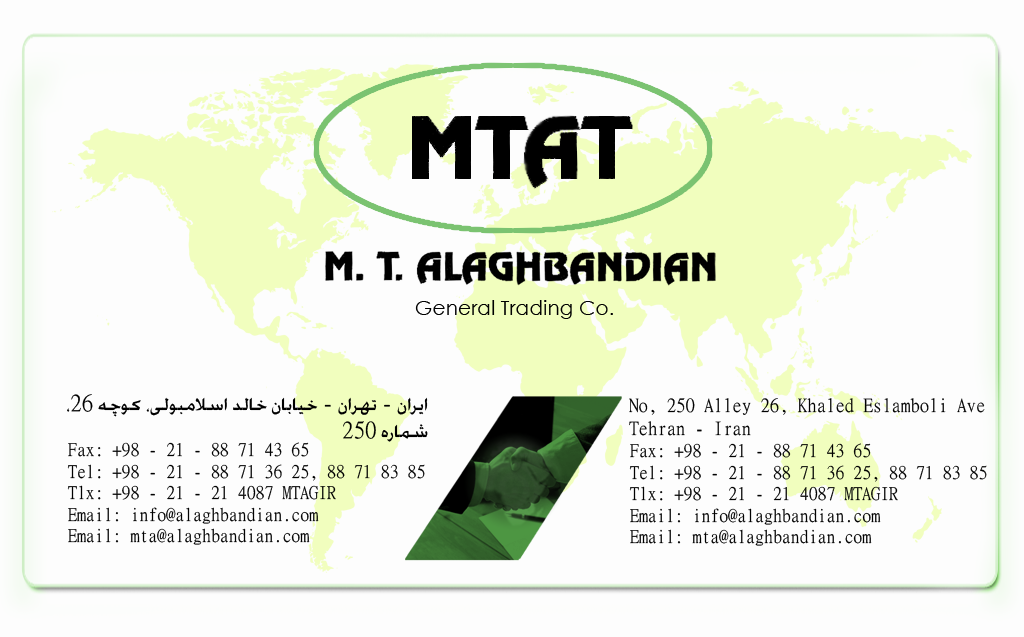
<style>
.page{position:relative;width:1024px;height:637px;background:#fdfdfd}
.page>*{position:absolute;margin:0}
.t1{font:20.3px "CenturyGothic";color:#000000}
.t2{font:23px "MingLiU-ExtB";color:#000000}
.t3{font:18.7px "MingLiU-ExtB";color:#010101}
.t4{font:17.9px "MingLiU-ExtB";color:#010101}
</style>
<div class="page">
<p class="t1" style="left:415px;top:300px;width:198px;height:19px">General Trading Co.</p>
<p class="t2" style="left:67px;top:394px;width:361px;height:48px">ایران - تهران - خیابان خالد اسلامبولی، کوچه 26،<br>شماره 250</p>
<p class="t3" style="left:629px;top:398px;width:356px;height:38px;text-align:right">No, 250 Alley 26, Khaled Eslamboli Ave<br>Tehran - Iran</p>
<p class="t4" style="left:67px;top:442px;width:358px;height:103px;text-align:right">Fax: +98 - 21 - 88 71 43 65<br>Tel: +98 - 21 - 88 71 36 25, 88 71 83 85<br>   Tlx: +98 - 21 - 21 4087 MTAGIR<br>Email: info@alaghbandian.com<br>Email: mta@alaghbandian.com</p>
<p class="t4" style="left:629px;top:443px;width:358px;height:103px;text-align:right">Fax: +98 - 21 - 88 71 43 65<br>Tel: +98 - 21 - 88 71 36 25, 88 71 83 85<br>   Tlx: +98 - 21 - 21 4087 MTAGIR<br>Email: info@alaghbandian.com<br>Email: mta@alaghbandian.com</p>
</div>
